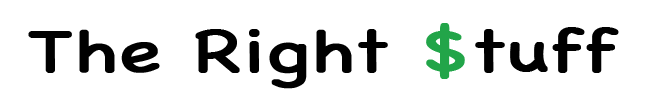
<style>
.page{position:relative;width:646px;height:100px;background:#ffffff}
.page>*{position:absolute;margin:0}
.t1{font:60px "Chalkboard";color:#000000;font-weight:bold;scale:1.3 1}
.t2{font:60px "Chalkboard";color:#22a549;font-weight:bold;scale:1.3 1}
</style>
<div class="page">
<p class="t1" style="left:28px;top:23px;width:591px;height:66px">The Right <span class="t2">$</span>tuff</p>
</div>
